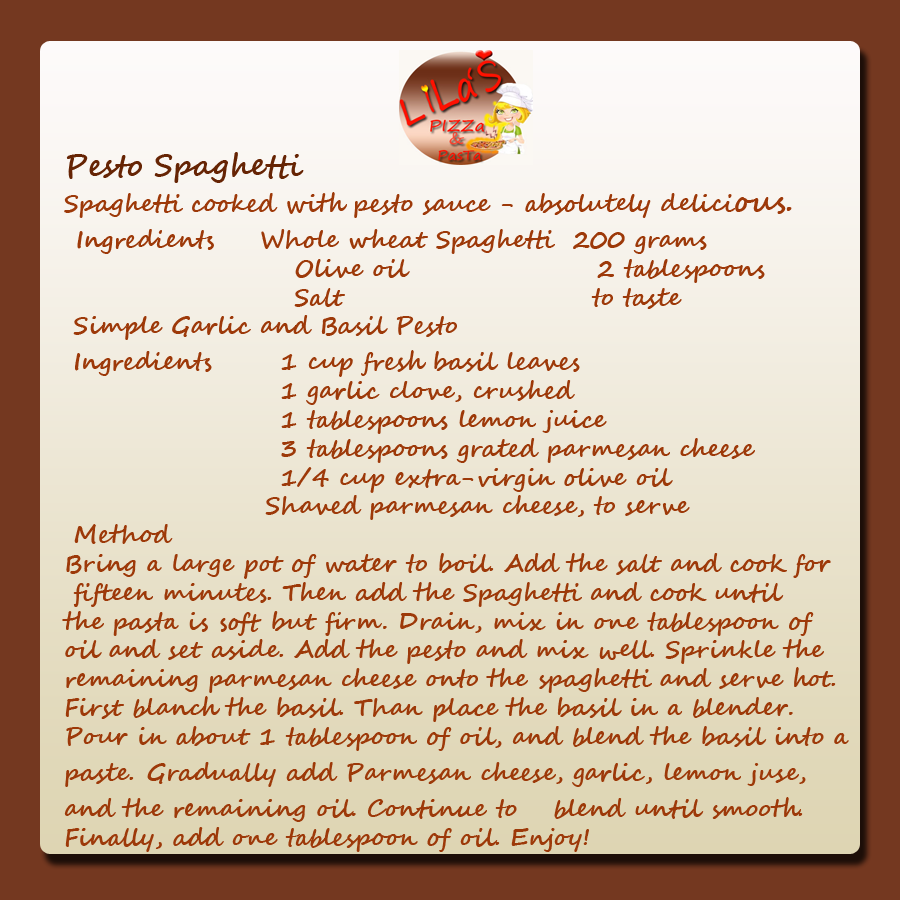
<style>
.page{position:relative;width:900px;height:900px}
.page>*{position:absolute;margin:0}
.t1{font:24px "SegoeScript-Bold";color:#9d3909}
.t2{font:30px "SegoeScript-Bold";color:#662404}
.t3{font:30px "SegoeScript-Bold";color:#9d3909}
</style>
<div class="page">
<p class="t1" style="left:62px;top:152px;width:787px;height:700px"><span class="t2">Pesto Spaghetti  <br></span>Spaghetti cooked with pesto sauce - absolutely delici<span class="t3">ous.<br> </span>Ingredients    Whole wheat Spaghetti  200 grams<br>                        Olive oil                   2 tablespoons<br>                        Salt                          to taste<br> Simple Garlic and Basil Pesto<br> Ingredients     1 cup fresh basil leaves<br>                    1 garlic clove, crushed<br>                    1 tablespoons lemon juice<br>                    3 tablespoons grated parmesan cheese<br>                    1/4 cup extra-virgin olive oil<br>                     Shaved parmesan cheese, to serve<br> Method<br>Bring a large pot of water to boil. Add the salt and cook for<br> fifteen minutes. Then add the Spaghetti and cook until <br>the pasta is soft but firm. Drain, mix in one tablespoon of <br>oil and set aside. Add the pesto and mix well. Sprinkle the <br>remaining parmesan cheese onto the spaghetti and serve hot. <br>First blanch the basil. Than place the basil in a blender. <br>Pour in about 1 tablespoon of oil, and blend the basil into a <br>paste. Gradually add Parmesan cheese, garlic, lemon juse, <br>and the remaining oil. Continue to   blend until smooth. <br>Finally, add one tablespoon of oil. Enjoy!</p>
</div>
